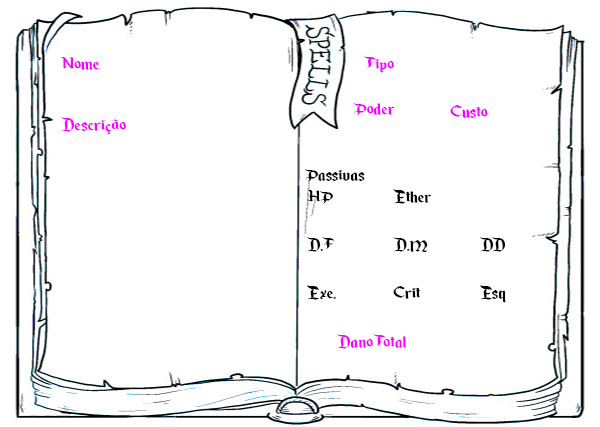
<style>
.page{position:relative;width:600px;height:427px;background:#ffffff}
.page>*{position:absolute;margin:0}
.t1{font:20px "EnchantedLand";color:#f600ff;scale:1.2 1}
.t2{font:20px "EnchantedLand";color:#000000;scale:1.2 1}
.t3{font:20px "EnchantedLand";color:#060606;scale:1.2 1}
.t4{font:20px "EnchantedLand";color:#ff00fc;scale:1.2 1}
</style>
<div class="page">
<p class="t1" style="left:61px;top:57px;width:39px;height:13px">Nome</p>
<p class="t1" style="left:364px;top:56px;width:30px;height:17px">Tipo</p>
<p class="t1" style="left:353px;top:103px;width:42px;height:13px">Poder</p>
<p class="t1" style="left:450px;top:105px;width:38px;height:13px">Custo</p>
<p class="t1" style="left:61px;top:117px;width:65px;height:17px">Descrição</p>
<p class="t2" style="left:305px;top:169px;width:60px;height:13px">Passivas</p>
<p class="t3" style="left:307px;top:189px;width:199px;height:114px">HP  Ether <br> <br>D.F  D.M  DD<br><br>Exe.  Crit  Esq</p>
<p class="t4" style="left:337px;top:334px;width:70px;height:15px">Dano Total</p>
</div>
